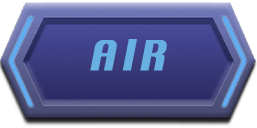
<style>
.page{position:relative;width:257px;height:128px}
.page>*{position:absolute;margin:0}
.t1{font:40.9px "Silom";color:#67b0e1;font-weight:bold;font-style:italic}
</style>
<div class="page">
<p class="t1" style="left:90px;top:39px;width:77px;height:32px">AIR</p>
</div>
